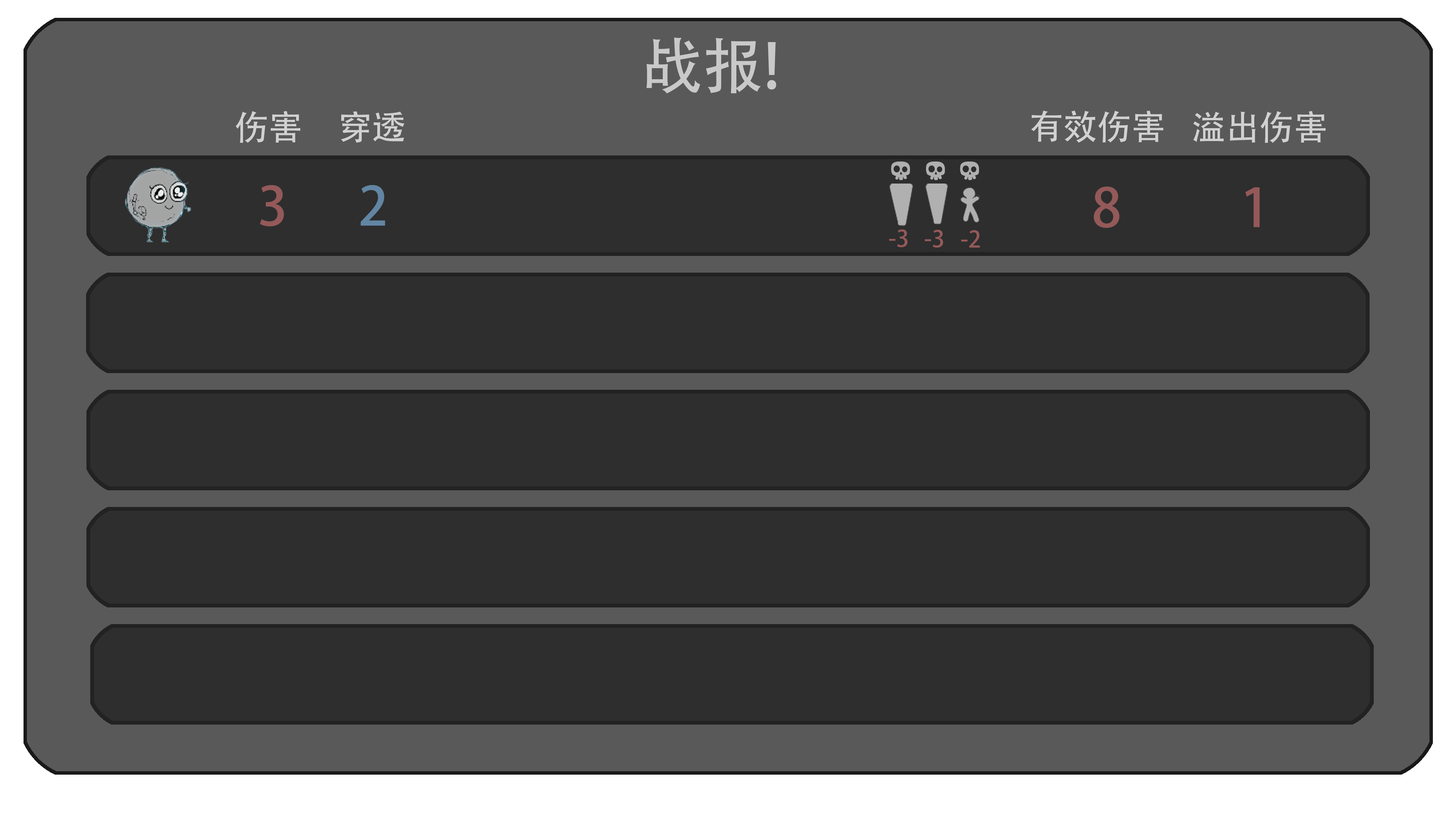
<style>
.page{position:relative;width:1456px;height:819px;background:#2e2e2e}
.page>*{position:absolute;margin:0}
.t1{font:60.7px "AdobeHeitiStd-Regular";color:#c9c9c9;text-transform:uppercase}
.t2{font:34.1px "AdobeHeitiStd-Regular";color:#d1d1d1}
.t3{font:53.1px "AdobeHeitiStd-Regular";color:#945959}
.t4{font:53.1px "AdobeHeitiStd-Regular";color:#6285a3}
.t5{font:22.7px "AdobeHeitiStd-Regular";color:#945959}
</style>
<div class="page">
<p class="t1" style="left:646px;top:37px;width:130px;height:57px">战报!</p>
<p class="t2" style="left:235px;top:111px;width:65px;height:32px">伤害</p>
<p class="t2" style="left:341px;top:111px;width:64px;height:32px">穿透</p>
<p class="t2" style="left:1031px;top:110px;width:132px;height:33px">有效伤害</p>
<p class="t2" style="left:1193px;top:111px;width:133px;height:32px">溢出伤害</p>
<p class="t3" style="left:260px;top:185px;width:24px;height:41px">3</p>
<p class="t4" style="left:361px;top:185px;width:24px;height:41px">2</p>
<p class="t3" style="left:1094px;top:187px;width:26px;height:41px">8</p>
<p class="t3" style="left:1245px;top:187px;width:15px;height:40px">1</p>
<p class="t5" style="left:889px;top:229px;width:19px;height:18px">-3</p>
<p class="t5" style="left:925px;top:230px;width:18px;height:18px">-3</p>
<p class="t5" style="left:961px;top:230px;width:19px;height:18px">-2</p>
</div>
